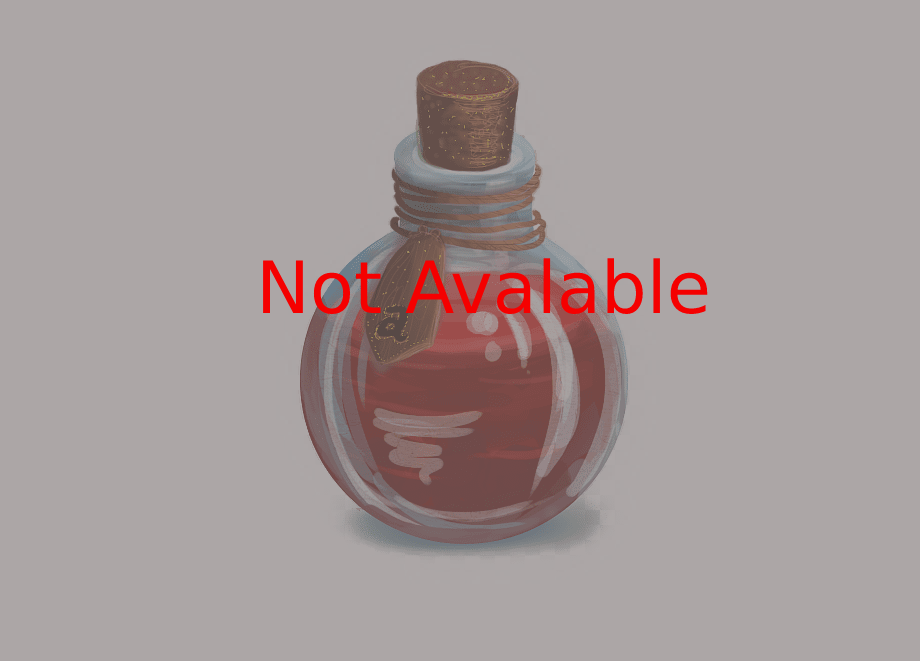
<style>
.page{position:relative;width:920px;height:661px;background:#aca6a6}
.page>*{position:absolute;margin:0}
.t1{font:72px "DejaVuSans";color:#f50000}
</style>
<div class="page">
<p class="t1" style="left:263px;top:258px;width:445px;height:57px">Not Avalable</p>
</div>
